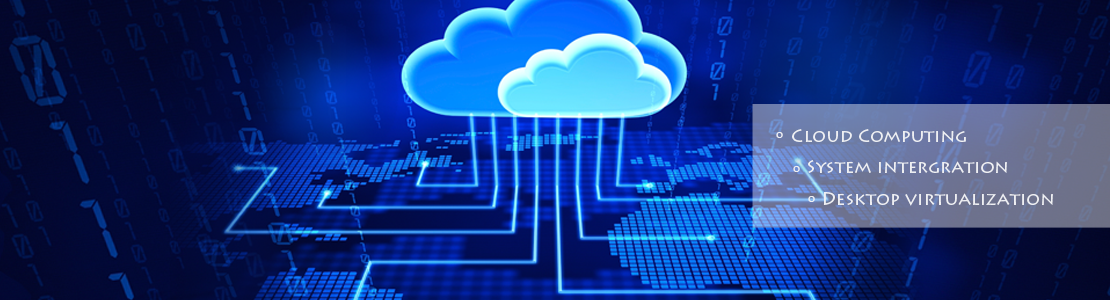
<style>
.page{position:relative;width:1110px;height:300px}
.page>*{position:absolute;margin:0}
.t1{font:14px "Sylfaen";color:#eeeff2}
.t2{font:18px "LithosPro-Regular";color:#eeeff2}
</style>
<div class="page">
<p class="t1" style="left:776px;top:132px;width:7px;height:6px">o</p>
<p class="t2" style="left:792px;top:129px;width:174px;height:13px">Cloud Computing</p>
<p class="t2" style="left:808px;top:160px;width:199px;height:13px">System intergration</p>
<p class="t1" style="left:793px;top:166px;width:7px;height:6px">o</p>
<p class="t1" style="left:808px;top:196px;width:7px;height:6px">o</p>
<p class="t2" style="left:823px;top:192px;width:230px;height:14px">Desktop virtualization</p>
</div>
